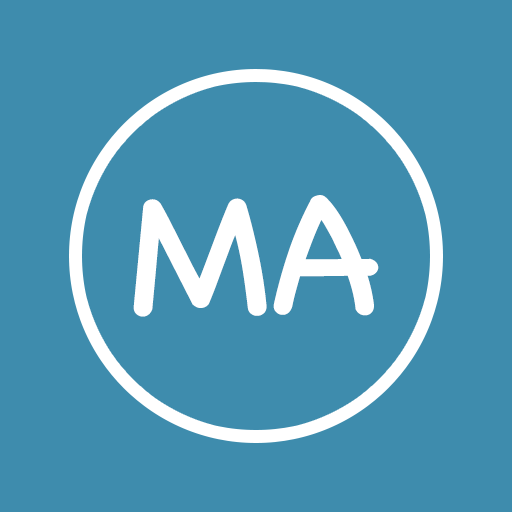
<style>
.page{position:relative;width:512px;height:512px;background:#3e8cad}
.page>*{position:absolute;margin:0}
.t1{font:170.1px "ChalkboardSE-Regular";color:#ffffff}
</style>
<div class="page">
<p class="t1" style="left:133px;top:195px;width:246px;height:122px">MA</p>
</div>
